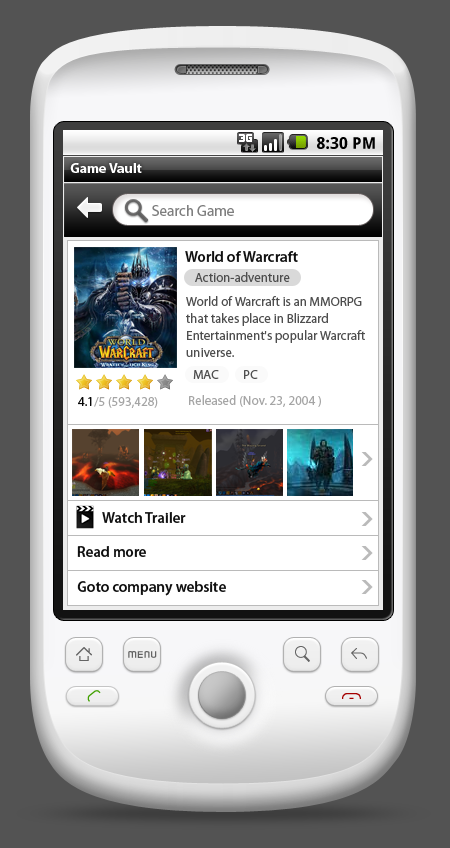
<style>
.page{position:relative;width:450px;height:848px;background:#535353}
.page>*{position:absolute;margin:0}
.t1{font:16px "DroidSans-Bold";letter-spacing:0.005em;color:#000000}
.t2{font:14px "MyriadPro-Bold";color:#ffffff}
.t3{font:15px "MyriadPro-Regular";color:#7f7f7f}
.t4{font:15px "MyriadPro-Semibold";color:#101010}
.t5{font:13px "MyriadPro-Regular";color:#4e4e4e}
.t6{font:13px/17px "MyriadPro-Regular";color:#4e4e4e}
.t7{font:13px "MyriadPro-Regular";color:#a5a5a5}
.t8{font:13px "MyriadPro-Regular";color:#080808}
</style>
<div class="page">
<p class="t1" style="left:317px;top:137px;width:58px;height:12px">8:30 PM</p>
<p class="t2" style="left:70px;top:163px;width:72px;height:10px">Game Vault</p>
<p class="t3" style="left:152px;top:205px;width:82px;height:11px">Search Game</p>
<p class="t4" style="left:185px;top:251px;width:113px;height:11px">World of Warcraft</p>
<p class="t5" style="left:195px;top:272px;width:95px;height:10px">Action-adventure</p>
<p class="t6" style="left:186px;top:296px;width:179px;height:61px">World of Warcraft is an MMORPG that takes place in Blizzard Entertainment's popular Warcraft universe.</p>
<p class="t5" style="left:193px;top:370px;width:26px;height:9px">MAC</p>
<p class="t5" style="left:244px;top:370px;width:14px;height:9px">PC</p>
<p class="t7" style="left:78px;top:397px;width:80px;height:11px"><span class="t8">4.1</span>/5 (593,428)</p>
<p class="t7" style="left:189px;top:395px;width:132px;height:12px">Released (Nov. 23, 2004 )</p>
<p class="t4" style="left:102px;top:512px;width:84px;height:11px">Watch Trailer</p>
<p class="t4" style="left:77px;top:546px;width:69px;height:11px">Read more</p>
<p class="t4" style="left:77px;top:581px;width:149px;height:15px">Goto company website</p>
</div>
